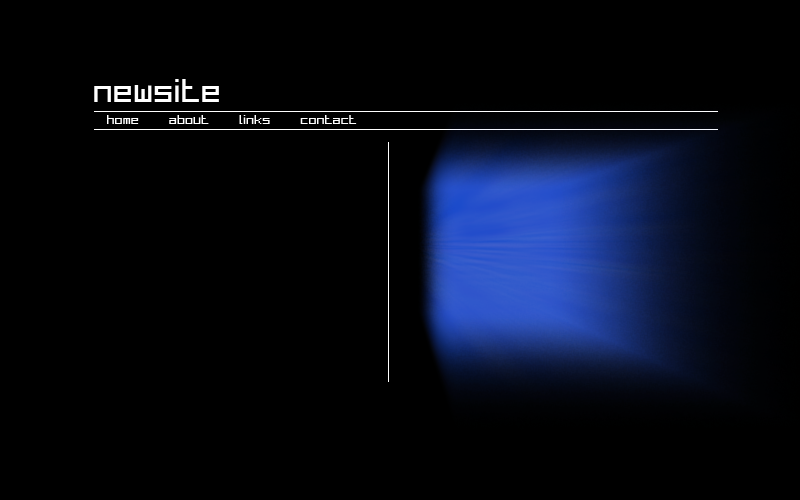
<style>
.page{position:relative;width:800px;height:500px;background:#000000}
.page>*{position:absolute;margin:0}
.t1{font:30px "BitLow";color:#ffffff}
.t2{font:12px "BitLow";color:#ffffff}
</style>
<div class="page">
<p class="t1" style="left:94px;top:79px;width:128px;height:30px">NEWSITE</p>
<p class="t2" style="left:107px;top:115px;width:280px;height:12px">HOME     ABOUT     LINKS     CONTACT</p>
</div>
